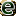
<style>
.page{position:relative;width:16px;height:16px}
.page>*{position:absolute;margin:0}
.t1{font:23.8px "TrebuchetMS-Bold";letter-spacing:0.025em;font-weight:bold}
</style>
<div class="page">
<p class="t1" style="left:1px;top:1px;width:14px;height:14px">e</p>
</div>
